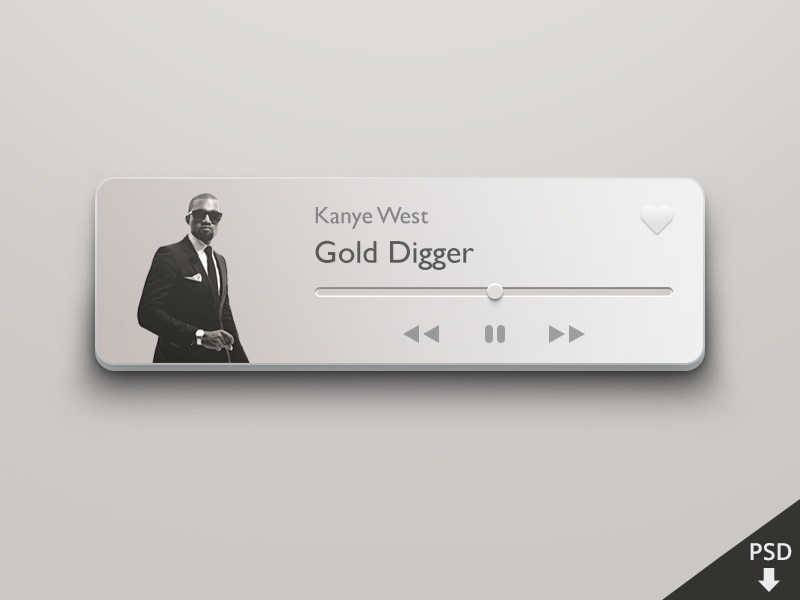
<style>
.page{position:relative;width:800px;height:600px}
.page>*{position:absolute;margin:0}
.t1{font:24px "GillSans";color:#858585}
.t2{font:32px "GillSans";color:#5a5a58}
.t3{font:23.6px "OpenSans-Semibold";color:#eaeced}
</style>
<div class="page">
<p class="t1" style="left:315px;top:207px;width:114px;height:22px">Kanye West</p>
<p class="t2" style="left:315px;top:240px;width:159px;height:30px">Gold Digger</p>
<p class="t3" style="left:750px;top:543px;width:42px;height:18px">PSD</p>
</div>
